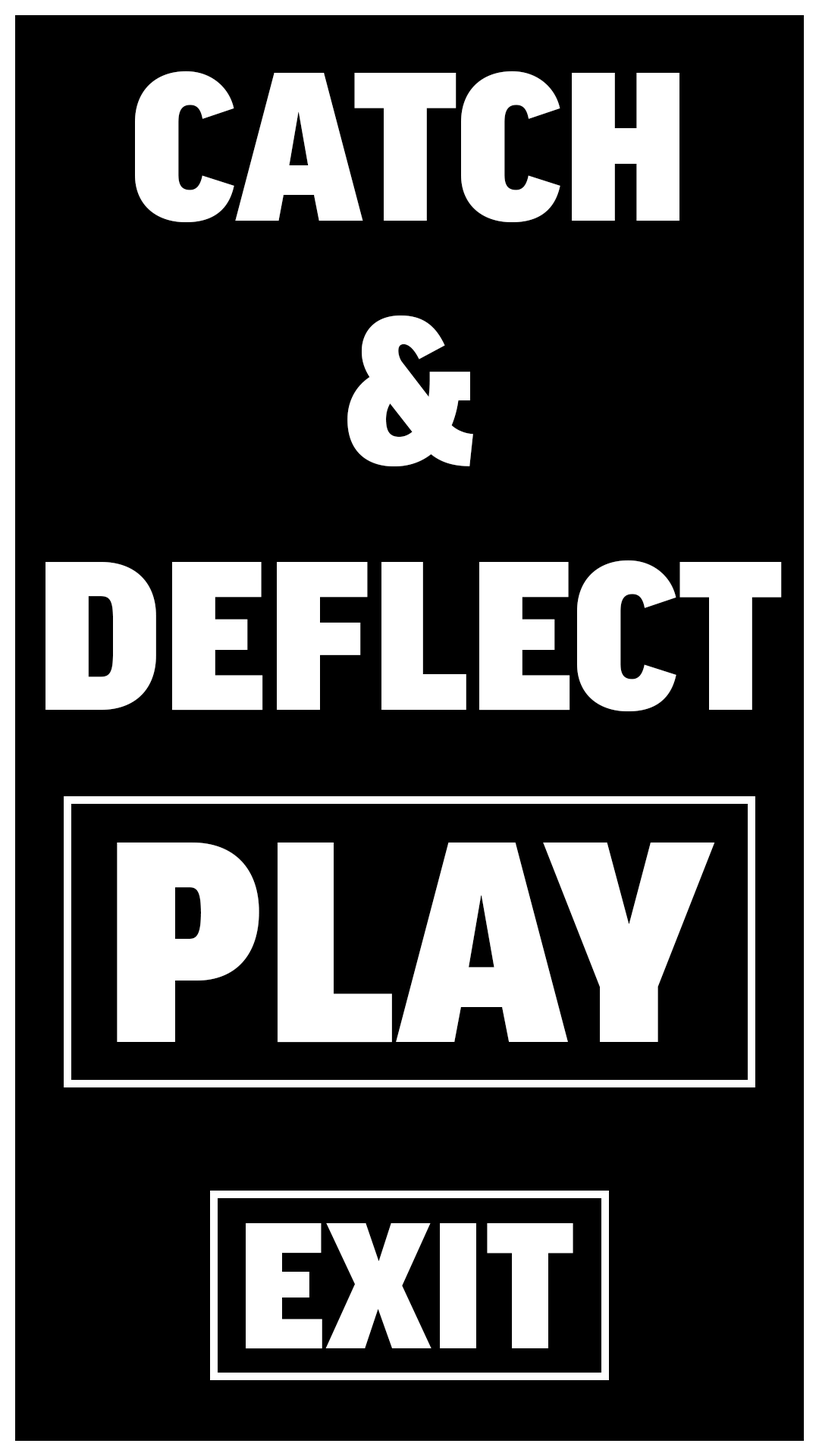
<style>
.page{position:relative;width:819px;height:1456px;background:#000000}
.page>*{position:absolute;margin:0}
.t1{font:203.6px "GoodPro-Ultra";color:#ffffff}
.t2{font:274.8px "GoodPro-Ultra";color:#ffffff}
.t3{font:172.2px "GoodPro-Ultra";color:#ffffff}
</style>
<div class="page">
<p class="t1" style="left:45px;top:71px;width:737px;height:641px;text-align:center">CATCH<br>&amp;<br>DEFLECT</p>
<p class="t2" style="left:117px;top:842px;width:598px;height:201px">PLAY</p>
<p class="t3" style="left:246px;top:1223px;width:327px;height:126px">EXIT</p>
</div>
